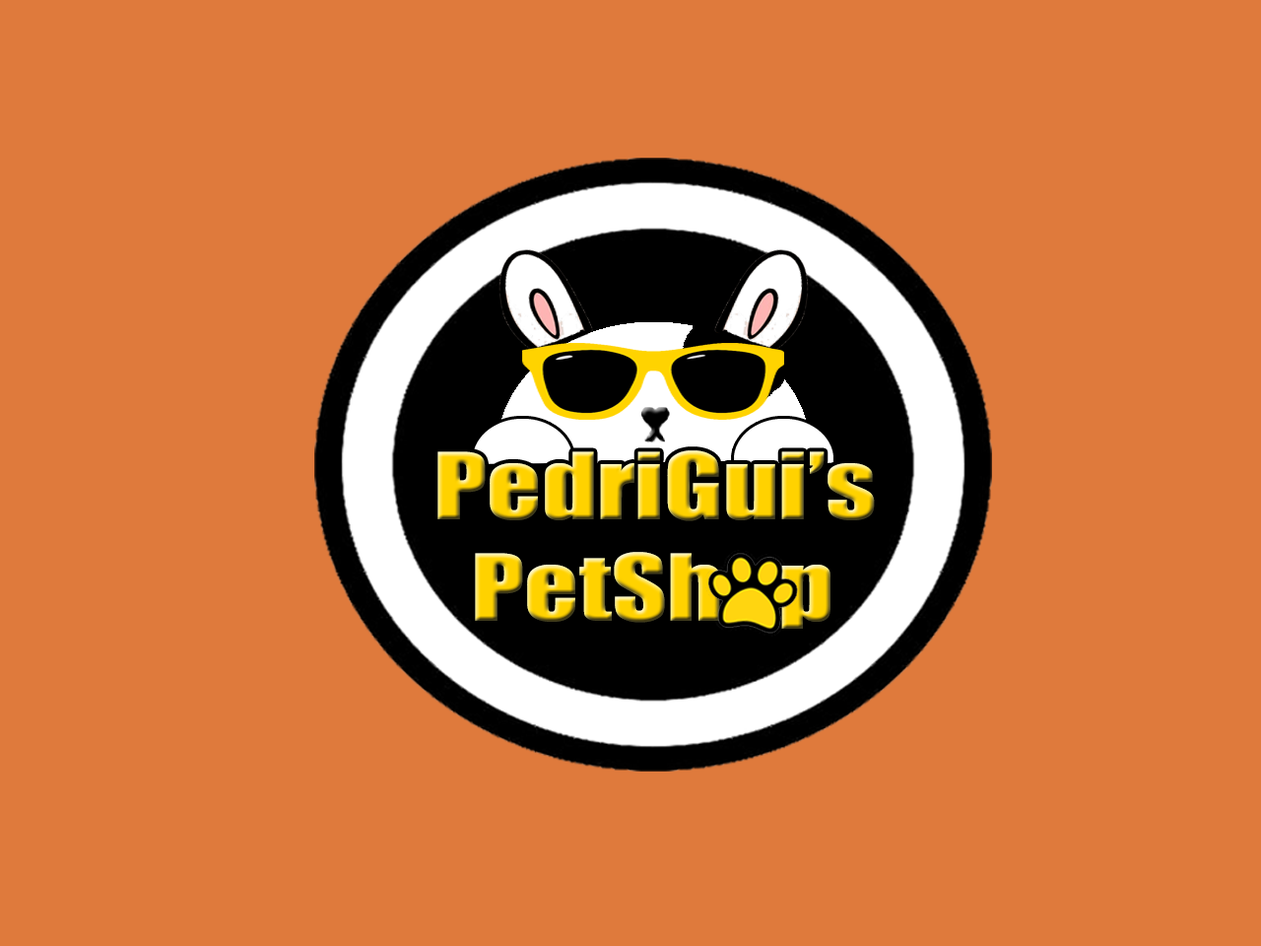
<style>
.page{position:relative;width:1261px;height:946px;background:#df7a3c}
.page>*{position:absolute;margin:0}
.t1{font:85.3px "Impact";scale:1.25 1}
</style>
<div class="page">
<p class="t1" style="left:437px;top:450px;width:438px;height:178px">PedriGui’s <br>  PetSh   p</p>
</div>
